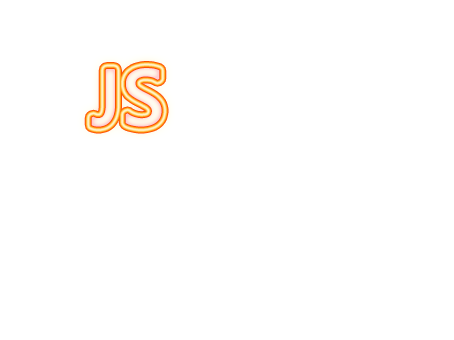
<style>
.page{position:relative;width:454px;height:340px;background:#ffffff}
.page>*{position:absolute;margin:0}
.t1{font:72px "MicrosoftYaHei";color:#fff0e4;font-weight:bold}
</style>
<div class="page">
<p class="t1" style="left:91px;top:68px;width:71px;height:59px">JS</p>
</div>
